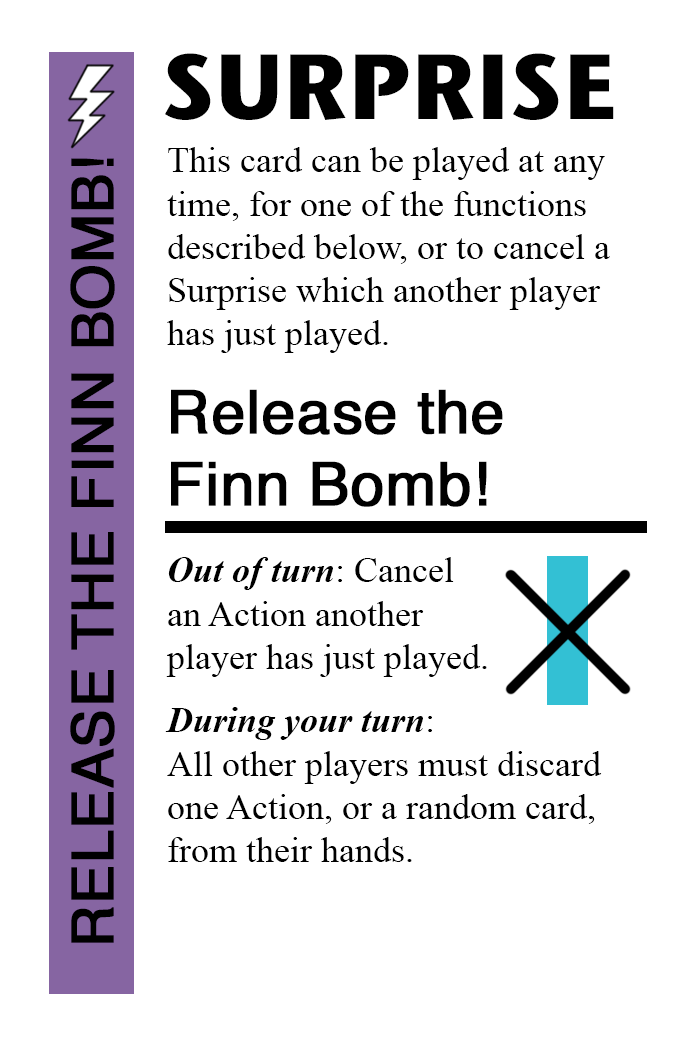
<style>
.page{position:relative;width:700px;height:1042px;background:#ffffff}
.page>*{position:absolute;margin:0}
.t1{font:92px "StoneSansITC-Bold";color:#000000}
.t2{font:36px "TimesNewRomanPSMT";color:#000000}
.t3{font:58px "Helvetica";color:#000000;font-weight:bold}
.t4{font:60px "Helvetica";color:#000000;font-weight:bold}
.t5{font:36px "TimesNewRomanPS-BoldItalicMT";color:#000000}
</style>
<div class="page">
<p class="t1" style="left:165px;top:53px;width:449px;height:67px">SURPRISE</p>
<p class="t2" style="left:167px;top:147px;width:443px;height:206px">This card can be played at any <br>time, for one of the functions<br>described below, or to cancel a<br>Surprise which another player<br>has just played.</p>
<p class="t3" style="left:70px;top:158px;width:45px;height:785px;rotate:-90deg">RELEASE THE FINN BOMB!</p>
<p class="t4" style="left:171px;top:389px;width:332px;height:118px">Release the<br>Finn Bomb!</p>
<p class="t2" style="left:166px;top:557px;width:321px;height:120px"><span class="t5">Out of turn</span>: Cancel<br>an Action another<br>player has just played.</p>
<p class="t2" style="left:165px;top:707px;width:437px;height:155px"><span class="t5">During your turn</span>: <br>All other players must discard<br>one Action, or a random card,<br>from their hands.</p>
</div>
